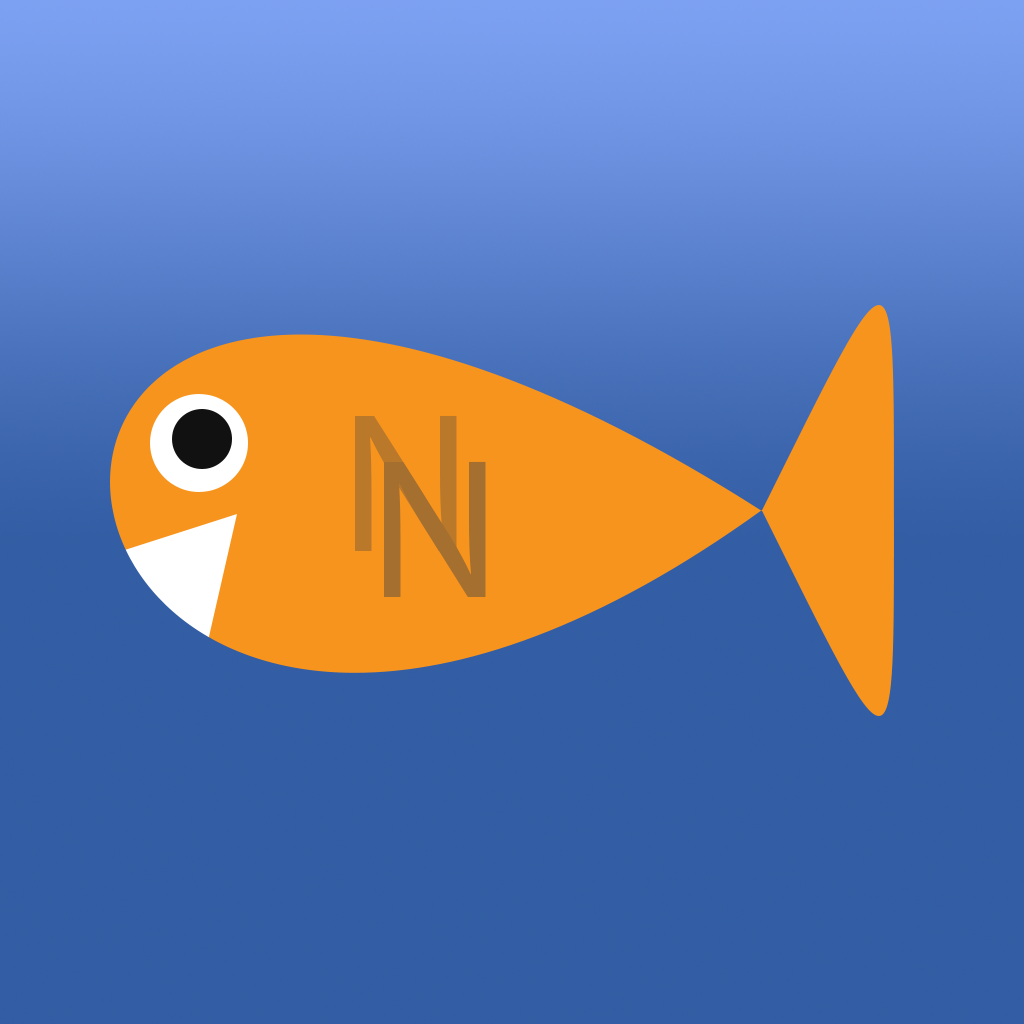
<style>
.page{position:relative;width:1024px;height:1024px}
.page>*{position:absolute;margin:0}
.t1{font:200px "MyriadPro-Regular";color:#a56f2f}
</style>
<div class="page">
<p class="t1" style="left:355px;top:415px;width:102px;height:136px;opacity:0.77">N</p>
<p class="t1" style="left:384px;top:461px;width:102px;height:136px">N</p>
</div>
